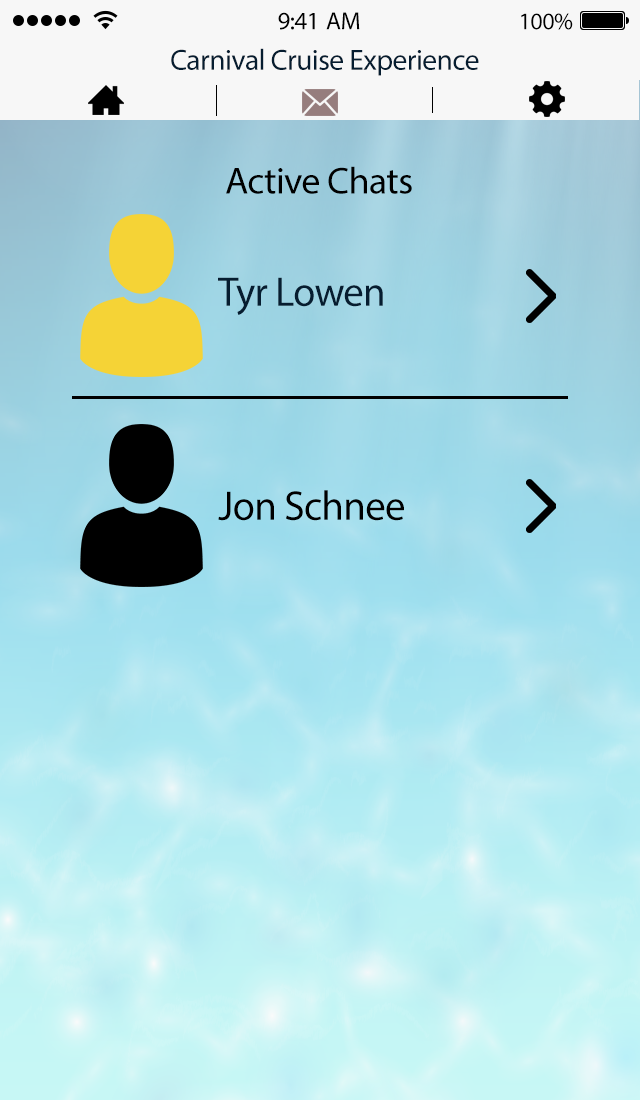
<style>
.page{position:relative;width:640px;height:1100px}
.page>*{position:absolute;margin:0}
.t1{font:25px "MyriadPro-Regular";letter-spacing:-0.02em;color:#000000}
.t2{font:24px "MyriadPro-Regular";letter-spacing:-0.02em;color:#000000}
.t3{font:29.4px "MyriadPro-Regular";letter-spacing:-0.02em;color:#061d30}
.t4{font:37.7px "MyriadPro-Regular";letter-spacing:-0.02em;color:#000000}
.t5{font:41.4px "MyriadPro-Regular";letter-spacing:-0.02em;color:#061d30}
.t6{font:41.4px "MyriadPro-Regular";letter-spacing:-0.02em;color:#000000}
</style>
<div class="page">
<p class="t1" style="left:278px;top:12px;width:82px;height:18px">9:41 AM</p>
<p class="t2" style="left:521px;top:13px;width:52px;height:17px">100%</p>
<p class="t3" style="left:171px;top:48px;width:308px;height:28px">Carnival Cruise Experience</p>
<p class="t4" style="left:226px;top:166px;width:186px;height:28px">Active Chats</p>
<p class="t5" style="left:218px;top:277px;width:165px;height:38px">Tyr Lowen</p>
<p class="t6" style="left:218px;top:490px;width:186px;height:31px">Jon Schnee</p>
</div>
